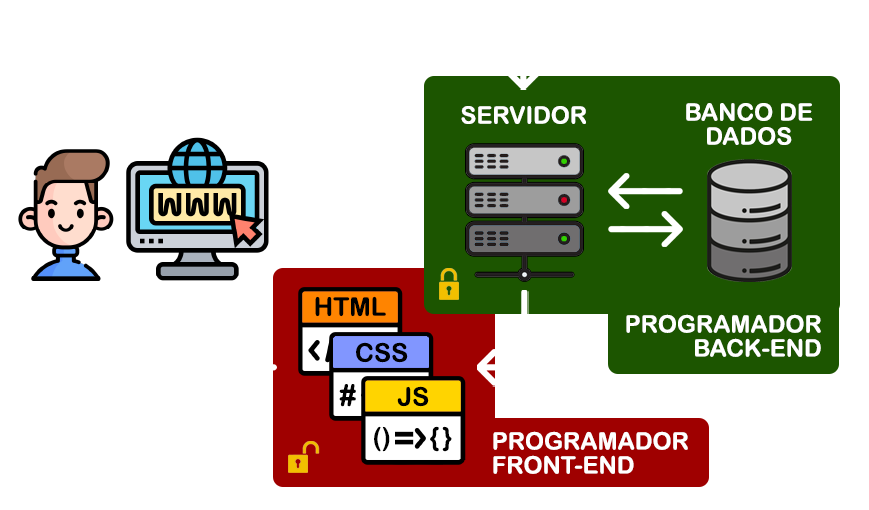
<style>
.page{position:relative;width:869px;height:510px;background:#ffffff}
.page>*{position:absolute;margin:0}
.t1{font:24px "ArialRoundedMTBold";color:#ffffff}
.t2{font:24px/24px "ArialRoundedMTBold";color:#ffffff}
.t3{font:25.7px "ArialRoundedMTBold";color:#000000}
.t4{font:30px "ArialRoundedMTBold";color:#000000}
.t5{font:36px "ArialRoundedMTBold";color:#000000}
</style>
<div class="page">
<p class="t1" style="left:461px;top:106px;width:125px;height:18px">SERVIDOR</p>
<p class="t2" style="left:686px;top:103px;width:127px;height:42px;text-align:center">BANCO DE<br>DADOS</p>
<p class="t3" style="left:315px;top:296px;width:71px;height:21px">HTML</p>
<p class="t2" style="left:626px;top:314px;width:195px;height:43px;text-align:right">PROGRAMADOR<br>BACK-END</p>
<p class="t3" style="left:356px;top:342px;width:52px;height:21px">CSS</p>
<p class="t4" style="left:339px;top:384px;width:17px;height:23px">#</p>
<p class="t3" style="left:397px;top:386px;width:32px;height:21px">JS</p>
<p class="t3" style="left:374px;top:426px;width:78px;height:26px">()      {}</p>
<p class="t5" style="left:395px;top:431px;width:19px;height:14px">=</p>
<p class="t2" style="left:493px;top:431px;width:195px;height:43px">PROGRAMADOR <br>FRONT-END</p>
</div>
